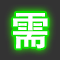
<style>
.page{position:relative;width:60px;height:60px;background:#333333}
.page>*{position:absolute;margin:0}
.t1{font:40px "FZHTJW--GB1-0";color:#ffffff;font-weight:bold}
</style>
<div class="page">
<p class="t1" style="left:13px;top:13px;width:35px;height:36px">需</p>
</div>
